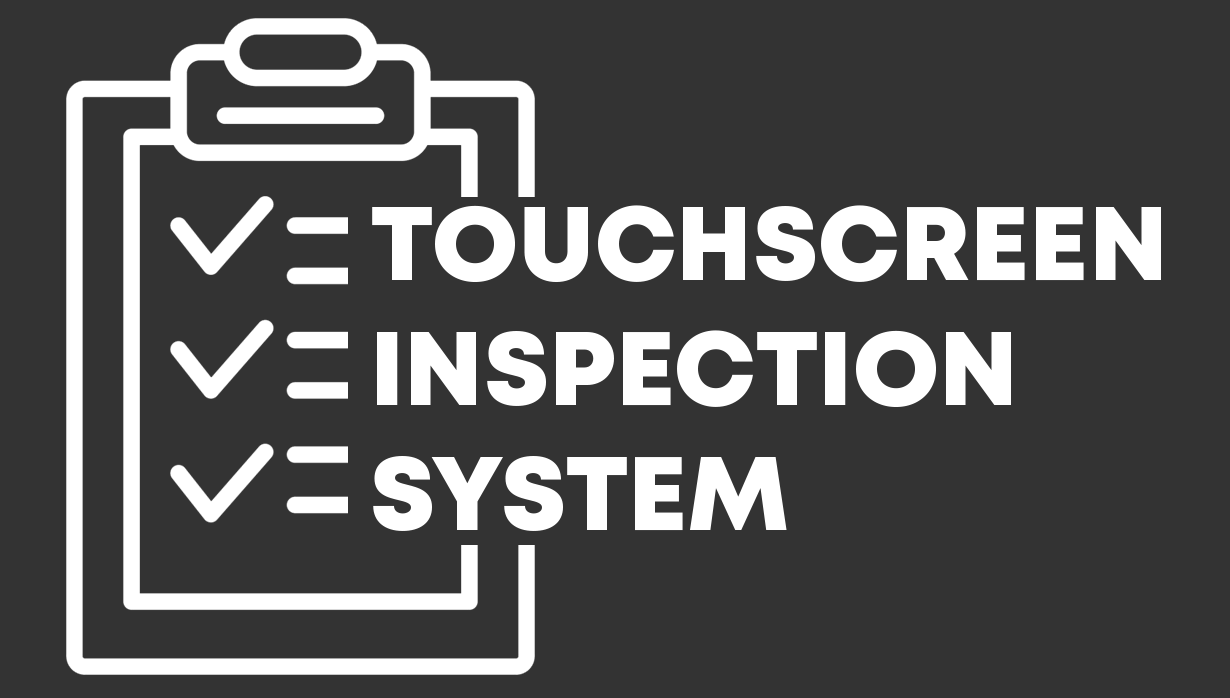
<style>
.page{position:relative;width:1230px;height:698px;background:#333333}
.page>*{position:absolute;margin:0}
.t1{font:104.2px "Mont-HeavyDEMO";color:#ffffff}
</style>
<div class="page">
<p class="t1" style="left:372px;top:205px;width:789px;height:326px">TOUCHSCREEN<br>INSPECTION<br>SYSTEM</p>
</div>
